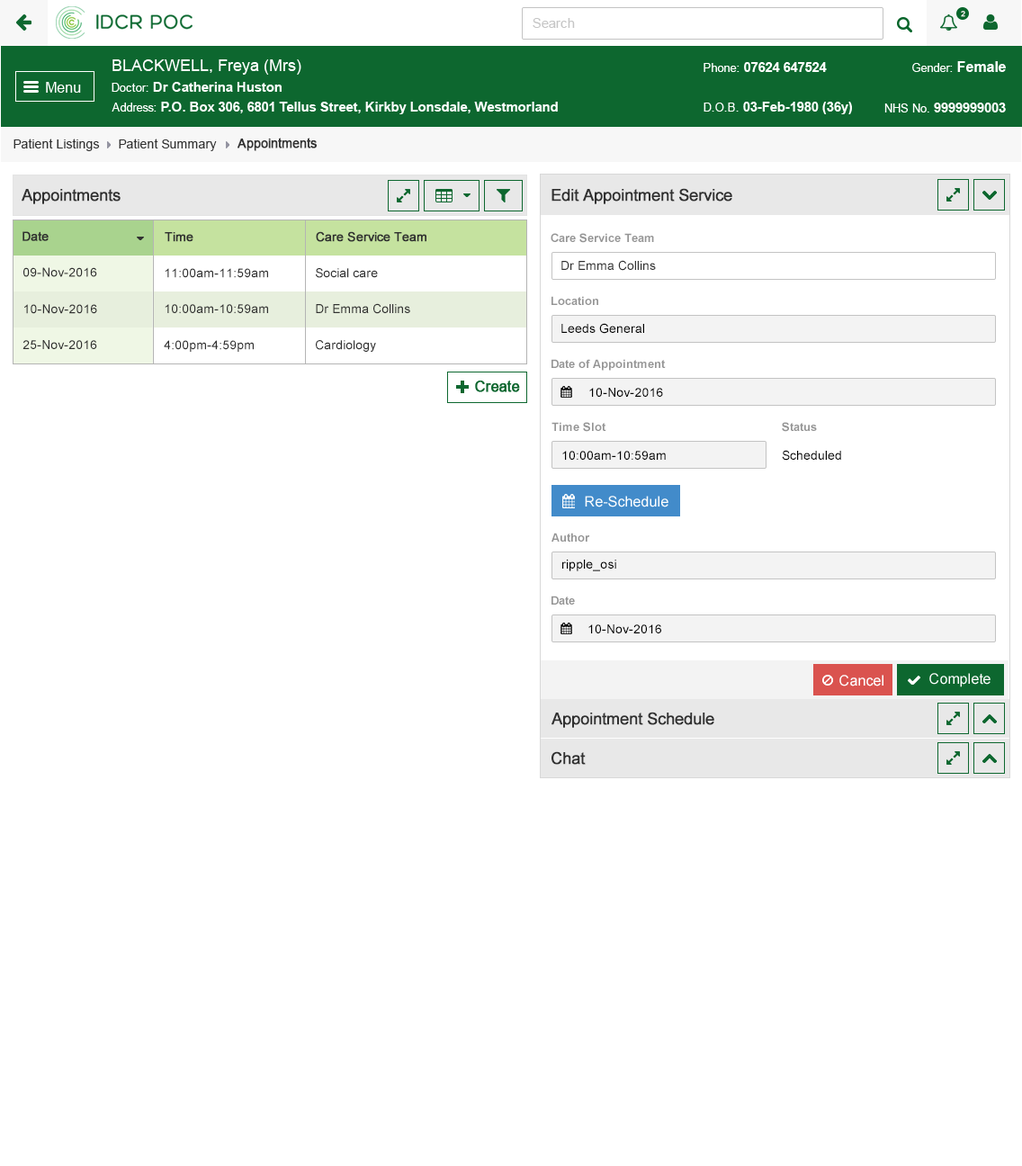
<style>
.page{position:relative;width:1022px;height:1166px;background:#ffffff}
.page>*{position:absolute;margin:0}
.t1{font:13.5px "ArialMT";color:#c5c5c5}
.t2{font:7.2px "ArialMT";color:#ffffff;font-weight:bold}
.t3{font:12.6px "ArialMT";color:#313131;font-weight:bold}
.t4{font:12.6px "ArialMT";color:#313131}
.t5{font:16.2px "ArialMT";color:#303030;font-weight:bold}
.t6{font:12.6px "ArialMT";color:#303030;font-weight:bold}
.t7{font:11.7px "Arial-BoldMT";color:#959595}
.t8{font:12.6px "ArialMT";color:#303030}
.t9{font:12.6px "ArialMT";color:#000000}
</style>
<div class="page">
<p class="t1" style="left:533px;top:18px;width:42px;height:10px">Search</p>
<p class="t2" style="left:961px;top:11px;width:5px;height:6px">2</p>
<p class="t3" style="left:238px;top:138px;width:79px;height:13px">Appointments</p>
<p class="t4" style="left:13px;top:139px;width:87px;height:12px">Patient Listings</p>
<p class="t4" style="left:119px;top:139px;width:98px;height:12px">Patient Summary</p>
<p class="t5" style="left:22px;top:189px;width:99px;height:15px">Appointments</p>
<p class="t5" style="left:552px;top:188px;width:181px;height:16px">Edit Appointment Service</p>
<p class="t6" style="left:22px;top:231px;width:27px;height:10px">Date</p>
<p class="t6" style="left:165px;top:232px;width:28px;height:10px">Time</p>
<p class="t6" style="left:316px;top:231px;width:111px;height:11px">Care Service Team</p>
<p class="t7" style="left:551px;top:233px;width:103px;height:10px">Care Service Team</p>
<p class="t8" style="left:23px;top:267px;width:74px;height:10px">09-Nov-2016</p>
<p class="t8" style="left:165px;top:268px;width:103px;height:10px">11:00am-11:59am</p>
<p class="t8" style="left:316px;top:268px;width:62px;height:10px">Social care</p>
<p class="t8" style="left:562px;top:260px;width:94px;height:11px">Dr Emma Collins</p>
<p class="t8" style="left:24px;top:304px;width:73px;height:10px">10-Nov-2016</p>
<p class="t8" style="left:165px;top:304px;width:103px;height:9px">10:00am-10:59am</p>
<p class="t8" style="left:316px;top:303px;width:94px;height:11px">Dr Emma Collins</p>
<p class="t7" style="left:552px;top:296px;width:46px;height:9px">Location</p>
<p class="t9" style="left:562px;top:323px;width:82px;height:11px">Leeds General</p>
<p class="t8" style="left:22px;top:340px;width:75px;height:9px">25-Nov-2016</p>
<p class="t8" style="left:164px;top:340px;width:90px;height:12px">4:00pm-4:59pm</p>
<p class="t8" style="left:316px;top:340px;width:60px;height:12px">Cardiology</p>
<p class="t7" style="left:552px;top:359px;width:114px;height:12px">Date of Appointment</p>
<p class="t9" style="left:589px;top:388px;width:74px;height:9px">10-Nov-2016</p>
<p class="t7" style="left:552px;top:422px;width:55px;height:10px">Time Slot</p>
<p class="t7" style="left:782px;top:422px;width:35px;height:10px">Status</p>
<p class="t9" style="left:782px;top:450px;width:59px;height:11px">Scheduled</p>
<p class="t9" style="left:562px;top:451px;width:104px;height:9px">10:00am-10:59am</p>
<p class="t7" style="left:552px;top:533px;width:38px;height:9px">Author</p>
<p class="t9" style="left:562px;top:560px;width:54px;height:11px">ripple_osi</p>
<p class="t7" style="left:552px;top:596px;width:23px;height:9px">Date</p>
<p class="t9" style="left:589px;top:625px;width:72px;height:9px">10-Nov-2016</p>
<p class="t5" style="left:552px;top:712px;width:163px;height:16px">Appointment Schedule</p>
<p class="t5" style="left:552px;top:751px;width:34px;height:14px">Chat</p>
</div>
